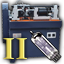
<style>
.page{position:relative;width:64px;height:64px}
.page>*{position:absolute;margin:0}
.t1{font:30.4px "Constantia-Bold";color:#ebd85b;scale:1.12 1}
</style>
<div class="page">
<p class="t1" style="left:3px;top:38px;width:24px;height:21px">II</p>
</div>
